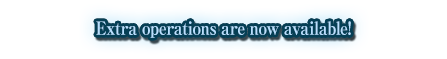
<style>
.page{position:relative;width:447px;height:59px;background:#ffffff}
.page>*{position:absolute;margin:0}
.t1{font:18px "RyuminPro-ExBold";letter-spacing:-0.04em;color:#b9e0ff;scale:0.9 1}
</style>
<div class="page">
<p class="t1" style="left:96px;top:21px;width:255px;height:17px">Extra operations are now available!</p>
</div>
